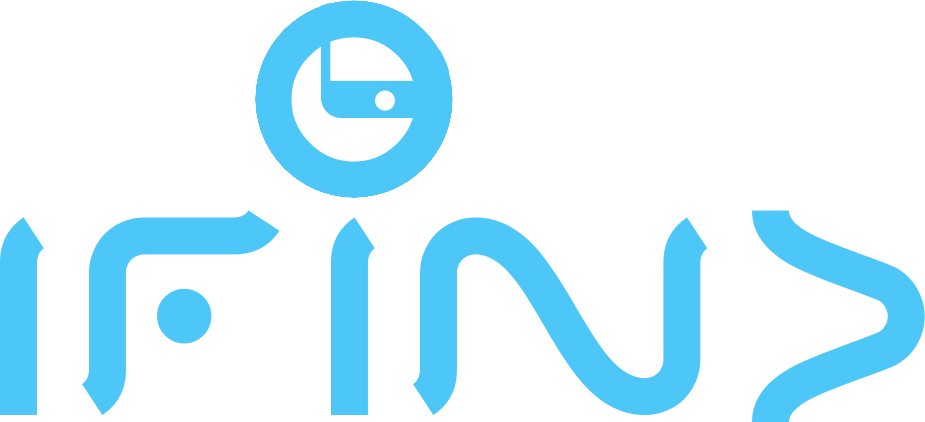
<style>
.page{position:relative;width:925px;height:422px;background:#ffffff}
.page>*{position:absolute;margin:0}
.t1{font:394.6px "VAIOCONDIOS";color:#4dc6f8}
</style>
<div class="page">
<p class="t1" style="left:0px;top:210px;width:925px;height:212px">IFIND</p>
</div>
